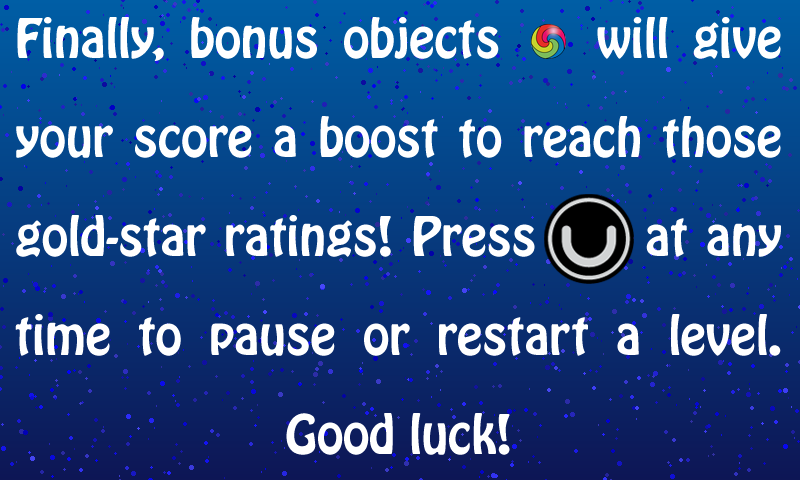
<style>
.page{position:relative;width:800px;height:480px}
.page>*{position:absolute;margin:0}
.t1{font:48px/99px "HoboStd";color:#ffffff}
</style>
<div class="page">
<p class="t1" style="left:15px;top:17px;width:766px;height:438px;text-align:justify">Finally, bonus objects    will give your score a boost to reach those gold-star ratings! Press      at any time to pause or restart a level. Good luck!</p>
</div>
